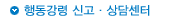
<style>
.page{position:relative;width:190px;height:21px;background:#ffffff}
.page>*{position:absolute;margin:0}
.t1{font:12px "YDIYGO330";color:#007ac3}
</style>
<div class="page">
<p class="t1" style="left:24px;top:5px;width:126px;height:11px">행동강령 신고·상담센터</p>
</div>
